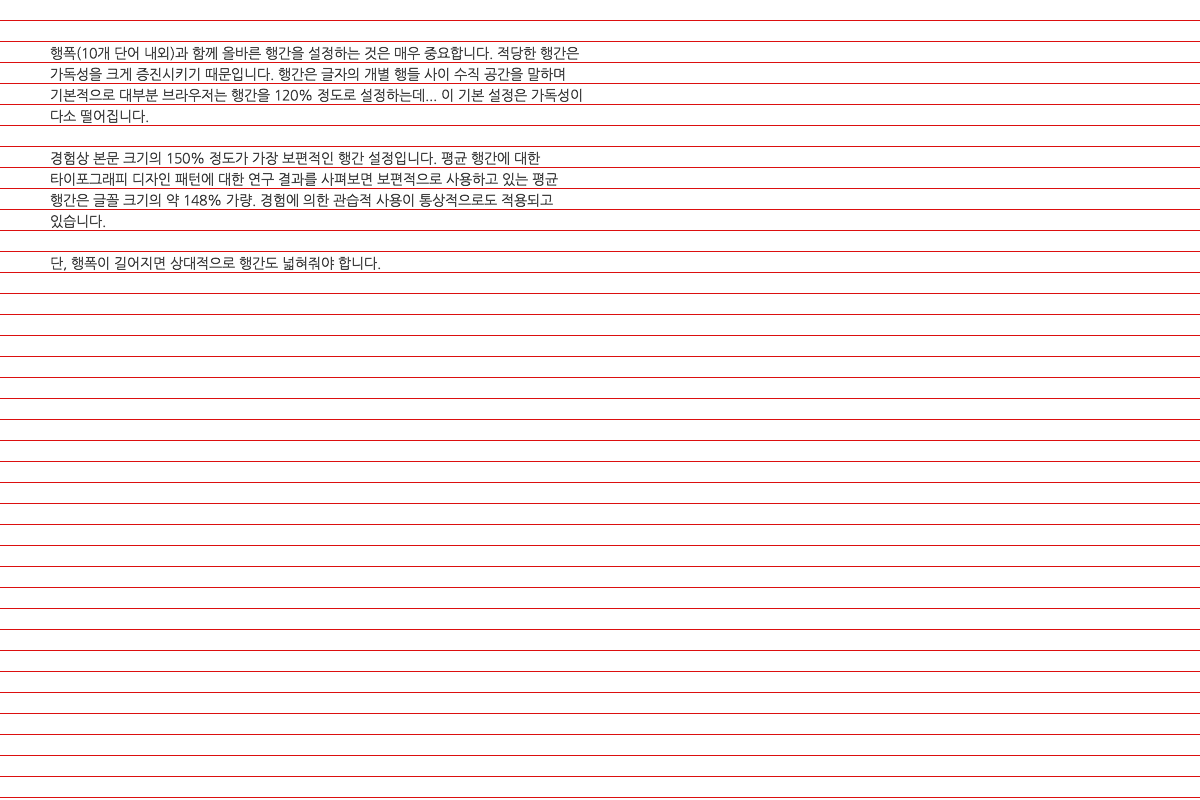
<style>
.page{position:relative;width:1200px;height:800px;background:#ffffff}
.page>*{position:absolute;margin:0}
.t1{font:14px/21px "NanumGothic";color:#3f3f3f}
</style>
<div class="page">
<p class="t1" style="left:50px;top:46px;width:532px;height:225px">행폭(10개 단어 내외)과 함께 올바른 행간을 설정하는 것은 매우 중요합니다. 적당한 행간은 가독성을 크게 증진시키기 때문입니다. 행간은 글자의 개별 행들 사이 수직 공간을 말하며 기본적으로 대부분 브라우저는 행간을 120% 정도로 설정하는데... 이 기본 설정은 가독성이 다소 떨어집니다.<br>경험상 본문 크기의 150% 정도가 가장 보편적인 행간 설정입니다. 평균 행간에 대한 타이포그래피 디자인 패턴에 대한 연구 결과를 사펴보면 보편적으로 사용하고 있는 평균 행간은 글꼴 크기의 약 148% 가량. 경험에 의한 관습적 사용이 통상적으로도 적용되고 있습니다.<br>단, 행폭이 길어지면 상대적으로 행간도 넓혀줘야 합니다.</p>
</div>
